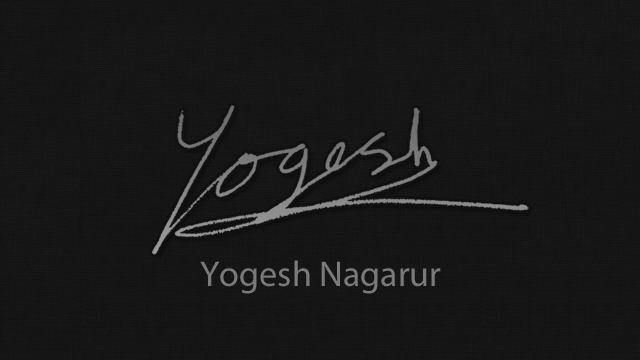
<style>
.page{position:relative;width:640px;height:360px}
.page>*{position:absolute;margin:0}
.t1{font:36px "MyriadPro-Regular";color:#7a7a7a}
</style>
<div class="page">
<p class="t1" style="left:200px;top:260px;width:241px;height:34px">Yogesh Nagarur</p>
</div>
